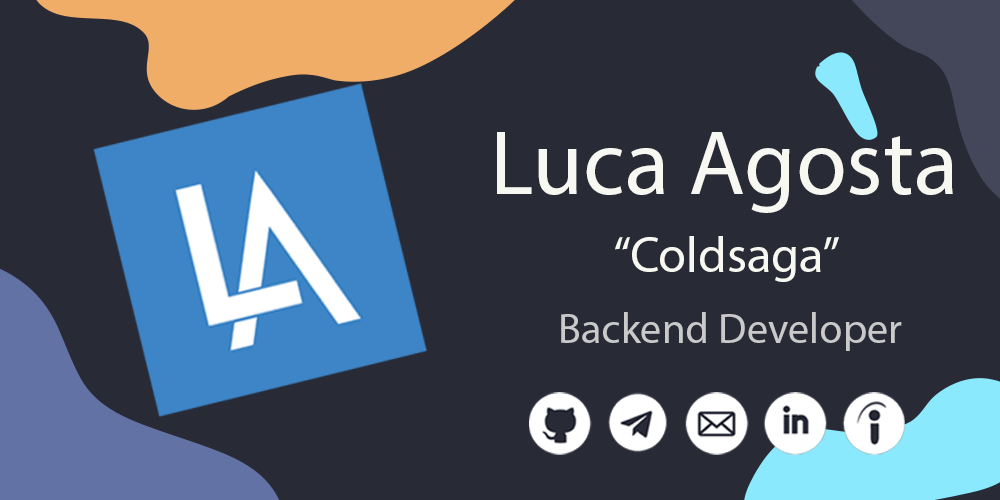
<style>
.page{position:relative;width:1000px;height:500px;background:#282a36}
.page>*{position:absolute;margin:0}
.t1{font:92.4px "MyriadPro-Regular";color:#f8f8f2}
.t2{font:50.6px "MyriadPro-Regular";color:#f8f8f2}
.t3{font:42.5px "MyriadPro-Regular";color:#cacaca}
</style>
<div class="page">
<p class="t1" style="left:497px;top:132px;width:456px;height:81px">Luca Agosta</p>
<p class="t2" style="left:615px;top:236px;width:224px;height:46px">“Coldsaga”</p>
<p class="t3" style="left:561px;top:312px;width:341px;height:39px">Backend Developer</p>
</div>
